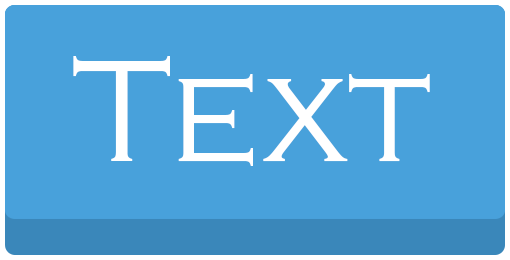
<style>
.page{position:relative;width:510px;height:260px;background:#48a1db}
.page>*{position:absolute;margin:0}
.t1{font:150px "CopperplateGothic-Light";color:#ffffff}
</style>
<div class="page">
<p class="t1" style="left:73px;top:56px;width:357px;height:110px">Text</p>
</div>
